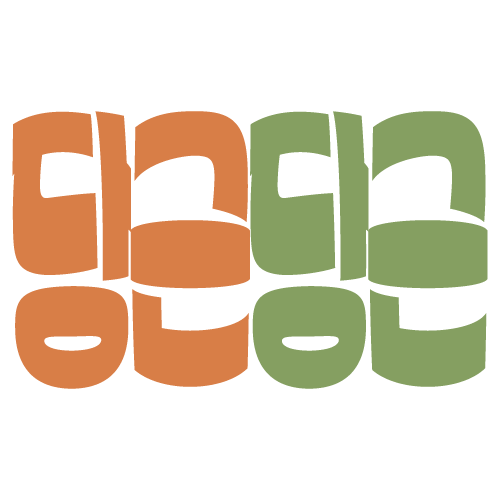
<style>
.page{position:relative;width:500px;height:500px;background:#ffffff}
.page>*{position:absolute;margin:0}
.t1{font:267.3px "Partial-Sans-KR";letter-spacing:-0.05em;color:#d87e47;scale:0.4 1}
.t2{font:267.3px "Partial-Sans-KR";letter-spacing:-0.05em;color:#859f61;scale:0.4 1}
</style>
<div class="page">
<p class="t1" style="left:12px;top:111px;width:119px;height:278px">당</p>
<p class="t1" style="left:130px;top:111px;width:120px;height:276px">근</p>
<p class="t2" style="left:250px;top:111px;width:119px;height:278px">당</p>
<p class="t2" style="left:368px;top:111px;width:120px;height:276px">근</p>
</div>
